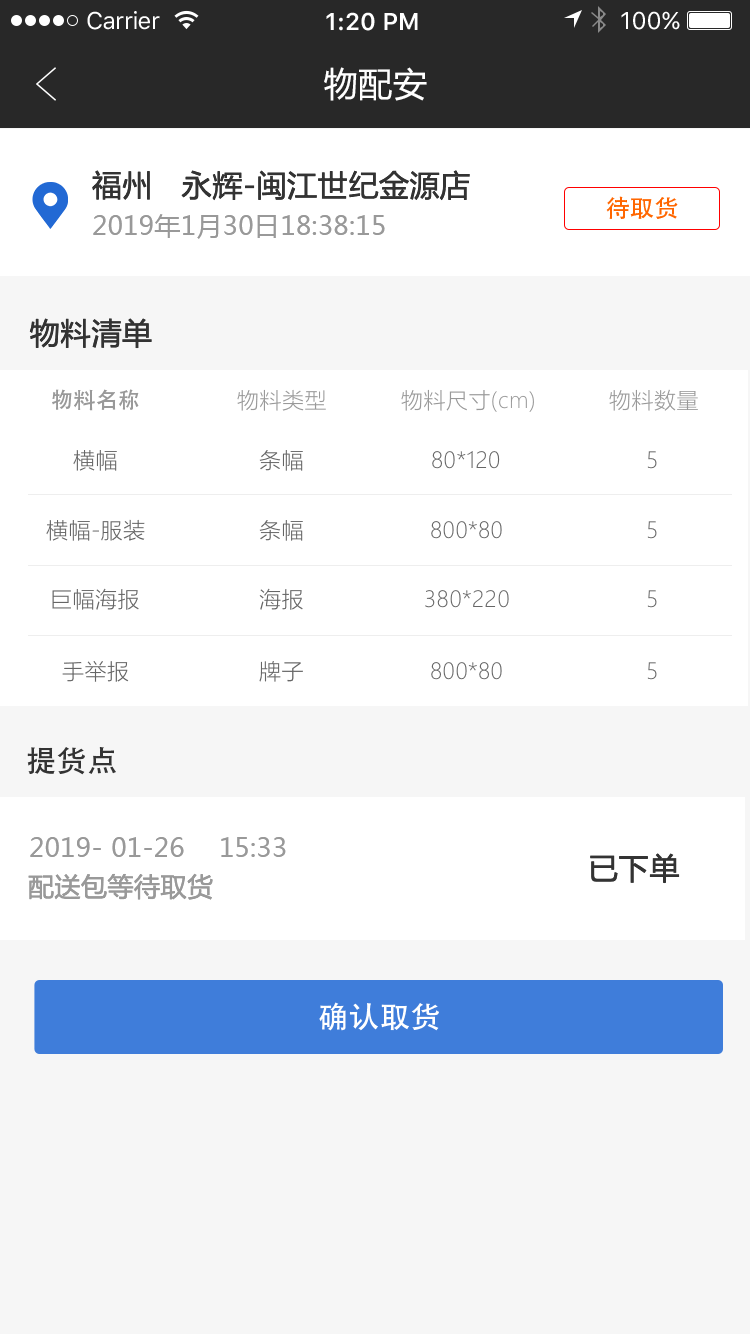
<style>
.page{position:relative;width:750px;height:1334px;background:#ffffff}
.page>*{position:absolute;margin:0}
.t1{font:24px "SFUIText-Regular";letter-spacing:-0.025em;color:#ffffff}
.t2{font:24px "SFUIText-Semibold";color:#ffffff}
.t3{font:24px "SFUIText-Regular";color:#ffffff}
.t4{font:34px "MicrosoftYaHei";letter-spacing:0.02em;color:#ffffff}
.t5{font:30px "MicrosoftYaHei";letter-spacing:0.02em;color:#333333}
.t6{font:24px "AdobeHeitiStd-Regular";letter-spacing:0.02em;color:#ff6600}
.t7{font:26px "MicrosoftYaHei";letter-spacing:0.02em;color:#999999}
.t8{font:22px "AdobeHeitiStd-Regular";letter-spacing:0.02em;color:#999999}
.t9{font:22px "MicrosoftYaHeiLight";letter-spacing:0.02em;color:#999999}
.t10{font:22px "MicrosoftYaHeiLight";letter-spacing:0.02em;color:#666666}
.t11{font:30px "AdobeHeitiStd-Regular";letter-spacing:0.02em;color:#333333}
.t12{font:30px "AdobeHeitiStd-Regular";letter-spacing:0.02em;color:#ffffff}
</style>
<div class="page">
<p class="t1" style="left:87px;top:11px;width:73px;height:19px">Carrier</p>
<p class="t2" style="left:326px;top:12px;width:92px;height:19px">1:20 PM</p>
<p class="t3" style="left:621px;top:11px;width:59px;height:19px">100%</p>
<p class="t4" style="left:324px;top:67px;width:103px;height:34px">物配安</p>
<p class="t5" style="left:92px;top:170px;width:378px;height:31px">福州   永辉-闽江世纪金源店</p>
<p class="t6" style="left:606px;top:196px;width:72px;height:23px">待取货</p>
<p class="t7" style="left:93px;top:214px;width:292px;height:25px">2019年1月30日18:38:15</p>
<p class="t5" style="left:29px;top:318px;width:123px;height:31px">物料清单</p>
<p class="t8" style="left:52px;top:389px;width:87px;height:22px">物料名称</p>
<p class="t9" style="left:237px;top:389px;width:89px;height:22px">物料类型</p>
<p class="t9" style="left:401px;top:389px;width:133px;height:23px">物料尺寸(cm)</p>
<p class="t9" style="left:609px;top:389px;width:89px;height:22px">物料数量</p>
<p class="t10" style="left:73px;top:450px;width:44px;height:21px">横幅</p>
<p class="t10" style="left:259px;top:450px;width:44px;height:21px">条幅</p>
<p class="t10" style="left:432px;top:451px;width:68px;height:18px">80*120</p>
<p class="t10" style="left:647px;top:451px;width:10px;height:18px">5</p>
<p class="t10" style="left:46px;top:519px;width:99px;height:22px">横幅-服装</p>
<p class="t10" style="left:259px;top:520px;width:44px;height:21px">条幅</p>
<p class="t10" style="left:431px;top:521px;width:71px;height:18px">800*80</p>
<p class="t10" style="left:647px;top:521px;width:10px;height:18px">5</p>
<p class="t10" style="left:52px;top:588px;width:87px;height:22px">巨幅海报</p>
<p class="t10" style="left:259px;top:588px;width:44px;height:22px">海报</p>
<p class="t10" style="left:425px;top:590px;width:84px;height:18px">380*220</p>
<p class="t10" style="left:647px;top:590px;width:10px;height:18px">5</p>
<p class="t10" style="left:62px;top:661px;width:67px;height:21px">手举报</p>
<p class="t10" style="left:259px;top:661px;width:44px;height:21px">牌子</p>
<p class="t10" style="left:431px;top:662px;width:71px;height:18px">800*80</p>
<p class="t10" style="left:647px;top:662px;width:10px;height:18px">5</p>
<p class="t11" style="left:27px;top:747px;width:89px;height:28px">提货点</p>
<p class="t7" style="left:30px;top:837px;width:256px;height:20px">2019- 01-26    15:33</p>
<p class="t5" style="left:590px;top:853px;width:90px;height:31px">已下单</p>
<p class="t7" style="left:28px;top:873px;width:185px;height:27px">配送包等待取货</p>
<p class="t12" style="left:319px;top:1002px;width:120px;height:29px">确认取货</p>
</div>
